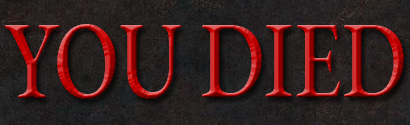
<style>
.page{position:relative;width:410px;height:125px}
.page>*{position:absolute;margin:0}
.t1{font:109.7px "EBGaramond-Medium";scale:0.78 1}
</style>
<div class="page">
<p class="t1" style="left:5px;top:24px;width:399px;height:75px">YOU DIED</p>
</div>
